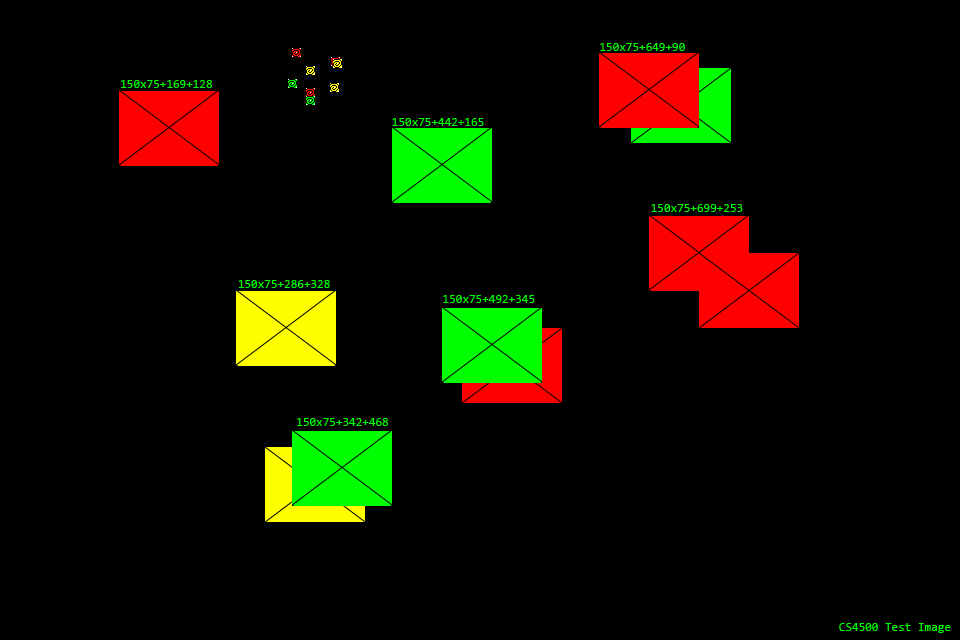
<style>
.page{position:relative;width:960px;height:640px;background:#000000}
.page>*{position:absolute;margin:0}
.t1{font:12px "Consolas";color:#00ff00}
</style>
<div class="page">
<p class="t1" style="left:600px;top:43px;width:85px;height:8px">150x75+649+90</p>
<p class="t1" style="left:121px;top:80px;width:91px;height:8px">150x75+169+128</p>
<p class="t1" style="left:392px;top:118px;width:92px;height:8px">150x75+442+165</p>
<p class="t1" style="left:651px;top:204px;width:92px;height:8px">150x75+699+253</p>
<p class="t1" style="left:238px;top:280px;width:92px;height:8px">150x75+286+328</p>
<p class="t1" style="left:443px;top:295px;width:92px;height:8px">150x75+492+345</p>
<p class="t1" style="left:297px;top:418px;width:91px;height:8px">150x75+342+468</p>
<p class="t1" style="left:839px;top:623px;width:112px;height:10px">CS4500 Test Image</p>
</div>
